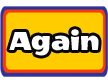
<style>
.page{position:relative;width:108px;height:84px;background:#ffcc00}
.page>*{position:absolute;margin:0}
.t1{font:29.4px "WendyOne-Regular";color:#ffffff;scale:1.09 1}
</style>
<div class="page">
<p class="t1" style="left:9px;top:29px;width:90px;height:27px">Again</p>
</div>
